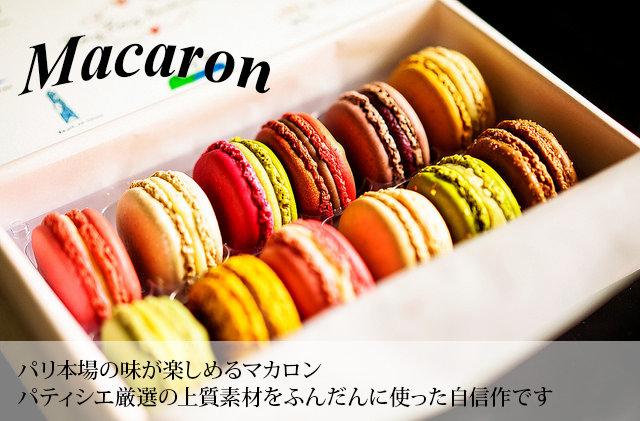
<style>
.page{position:relative;width:640px;height:421px}
.page>*{position:absolute;margin:0}
.t1{font:66.7px "TimesNewRomanPS-BoldItalicMT";color:#000000}
.t2{font:21.3px/26.7px "KozMinPr6N-Medium";color:#000000}
</style>
<div class="page">
<p class="t1" style="left:17px;top:34px;width:254px;height:62px">Macaron</p>
<p class="t2" style="left:18px;top:359px;width:535px;height:49px">パリ本場の味が楽しめるマカロン<br>パティシエ厳選の上質素材をふんだんに使った自信作です</p>
</div>
